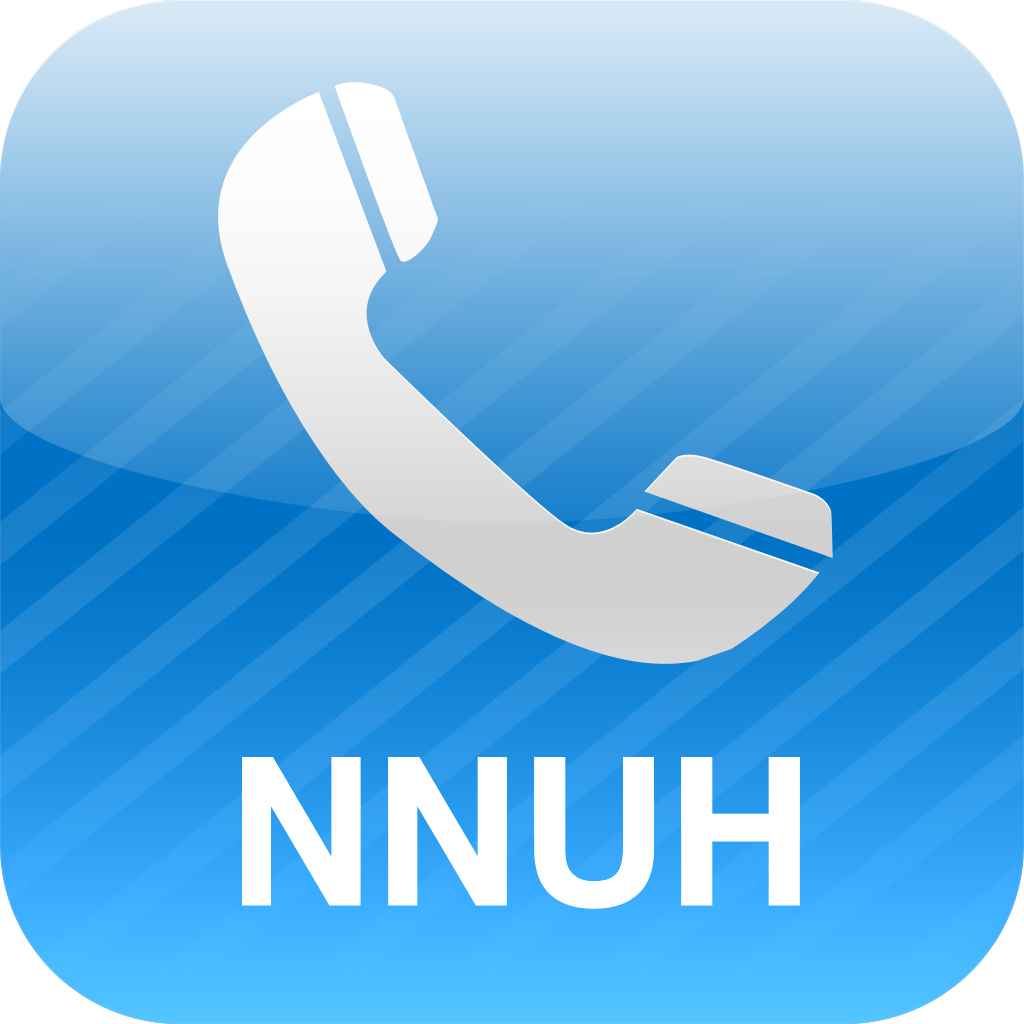
<style>
.page{position:relative;width:1024px;height:1024px}
.page>*{position:absolute;margin:0}
.t1{font:207.6px "HelveticaNeue-Bold";letter-spacing:0.005em;color:#ffffff;scale:0.95 1}
</style>
<div class="page">
<p class="t1" style="left:242px;top:757px;width:558px;height:152px">NNUH</p>
</div>
